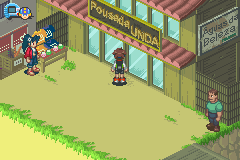
<style>
.page{position:relative;width:240px;height:160px;background:#c6c673}
.page>*{position:absolute;margin:0}
.t1{font:12px "ArialNarrow-Bold";color:#c6b563;scale:1.11 1}
.t2{font:12px "ArialNarrow-Bold";letter-spacing:-0.1em;color:#c6b563;scale:1.11 1}
.t3{font:9px "ArialMT";color:#424a4a;scale:1.14 1}
.t4{font:9px "ArialMT";letter-spacing:-0.14em;color:#424a4a;scale:1.14 1}
.t5{font:8px "ArialMT";letter-spacing:0.08em;color:#424a4a;scale:1.14 1}
.t6{font:10px "ArialMT";color:#424a4a;scale:1.14 1}
.t7{font:10px "ArialMT";letter-spacing:-0.06em;color:#424a4a;scale:1.14 1}
.t8{font:10px "ArialMT";letter-spacing:0.02em;color:#424a4a;scale:1.14 1}
.t9{font:12px "Arial-BoldMT";letter-spacing:0.02em;color:#c6b563;scale:1.06 1}
.t10{font:12px "Arial-BoldMT";letter-spacing:-0.06em;color:#c6b563;scale:1.06 1}
</style>
<div class="page">
<p class="t1" style="left:91px;top:1px;width:38px;height:28px;rotate:26deg"><span class="t2">P</span>ousada</p>
<p class="t3" style="left:203px;top:14px;width:36px;height:33px;rotate:-28deg">Á<span class="t4">g</span>uas  <span class="t5">d</span>a<br><span class="t6">B</span><span class="t7">e</span><span class="t6">le</span><span class="t8">z</span><span class="t6">a</span></p>
<p class="t9" style="left:131px;top:26px;width:28px;height:22px;rotate:26deg">U<span class="t10">N</span>D<span class="t10">A</span></p>
</div>
